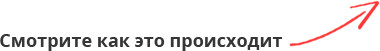
<style>
.page{position:relative;width:380px;height:51px;background:#ffffff}
.page>*{position:absolute;margin:0}
.t1{font:18px "OpenSans-Bold";color:#363636}
</style>
<div class="page">
<p class="t1" style="left:0px;top:34px;width:282px;height:17px">Смотрите как это происходит</p>
</div>
